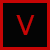
<style>
.page{position:relative;width:50px;height:50px;background:#040404}
.page>*{position:absolute;margin:0}
.t1{font:27.6px "LucidaGrande";color:#c70505}
</style>
<div class="page">
<p class="t1" style="left:16px;top:15px;width:19px;height:20px">V</p>
</div>
